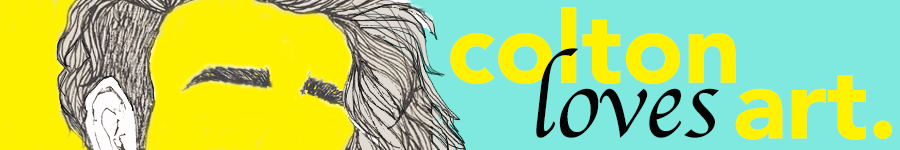
<style>
.page{position:relative;width:900px;height:150px;background:#7fe8df}
.page>*{position:absolute;margin:0}
.t1{font:100px "Avenir-Black";color:#fff200}
.t2{font:101.6px "Apple-Chancery";color:#040404}
</style>
<div class="page">
<p class="t1" style="left:450px;top:7px;width:286px;height:77px">colton</p>
<p class="t2" style="left:536px;top:48px;width:183px;height:90px">loves</p>
<p class="t1" style="left:735px;top:75px;width:157px;height:65px">art.</p>
</div>
